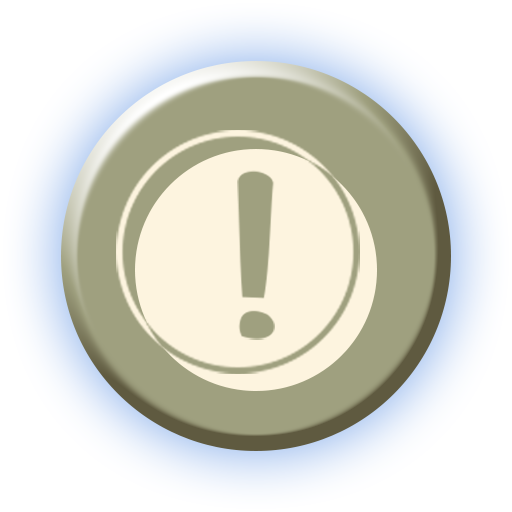
<style>
.page{position:relative;width:512px;height:512px;background:#ffffff}
.page>*{position:absolute;margin:0}
.t1{font:226.2px "Neucha";color:#9fa07f;text-transform:uppercase;scale:1.77 1}
</style>
<div class="page">
<p class="t1" style="left:237px;top:170px;width:38px;height:170px;rotate:-4deg">!</p>
</div>
